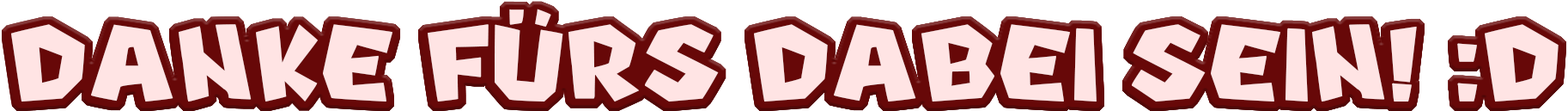
<style>
.page{position:relative;width:1568px;height:111px;background:#ffe4e4}
.page>*{position:absolute;margin:0}
.t1{font:120.7px "NewSuperMarioFontU";color:#ffe4e4}
</style>
<div class="page">
<p class="t1" style="left:11px;top:9px;width:1548px;height:92px">DANKE FÜRS DABEI SEIN! :D</p>
</div>
